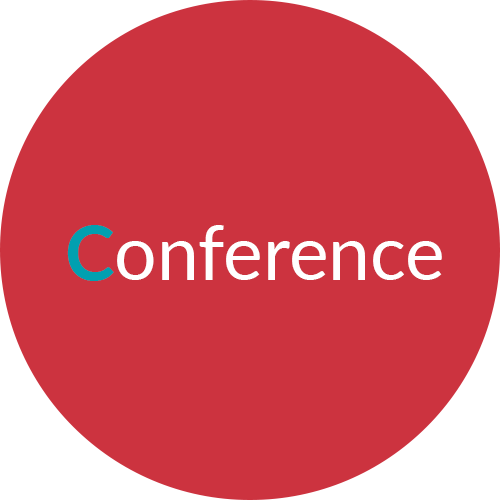
<style>
.page{position:relative;width:500px;height:500px;background:#cc333f}
.page>*{position:absolute;margin:0}
.t1{font:75px "Lato-Regular";color:#ffffff}
.t2{font:75px "Lato-Bold";color:#01a0b0}
</style>
<div class="page">
<p class="t1" style="left:67px;top:225px;width:375px;height:56px"><span class="t2">C</span>onference</p>
</div>
